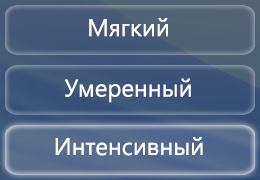
<style>
.page{position:relative;width:260px;height:180px}
.page>*{position:absolute;margin:0}
.t1{font:24px "SegoeUI";color:#ffffff}
</style>
<div class="page">
<p class="t1" style="left:89px;top:18px;width:79px;height:19px">Мягкий</p>
<p class="t1" style="left:65px;top:78px;width:126px;height:25px">Умеренный</p>
<p class="t1" style="left:55px;top:137px;width:148px;height:19px">Интенсивный</p>
</div>
